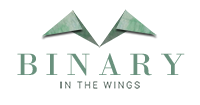
<style>
.page{position:relative;width:200px;height:105px;background:#ffffff}
.page>*{position:absolute;margin:0}
.t1{font:32.4px "BodoniMT";letter-spacing:0.22em;color:#69917d}
.t2{font:9.1px "Roboto-Light";letter-spacing:0.21em;color:#40534a}
</style>
<div class="page">
<p class="t1" style="left:17px;top:53px;width:168px;height:23px">BINARY</p>
<p class="t2" style="left:60px;top:81px;width:80px;height:8px">IN THE WINGS</p>
</div>
